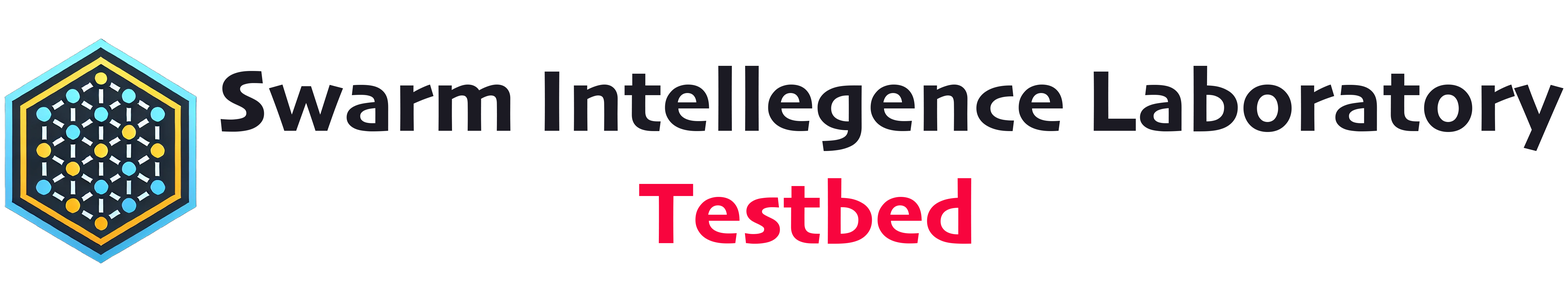
<style>
.page{position:relative;width:1568px;height:302px;background:#ffffff}
.page>*{position:absolute;margin:0}
.t1{font:90.5px "Skia-Bold";color:#1b1a23}
.t2{font:90.5px "Skia-Bold";color:#f8053e}
</style>
<div class="page">
<p class="t1" style="left:220px;top:66px;width:1343px;height:85px">Swarm Intellegence Laboratory</p>
<p class="t2" style="left:639px;top:178px;width:332px;height:65px">Testbed</p>
</div>
